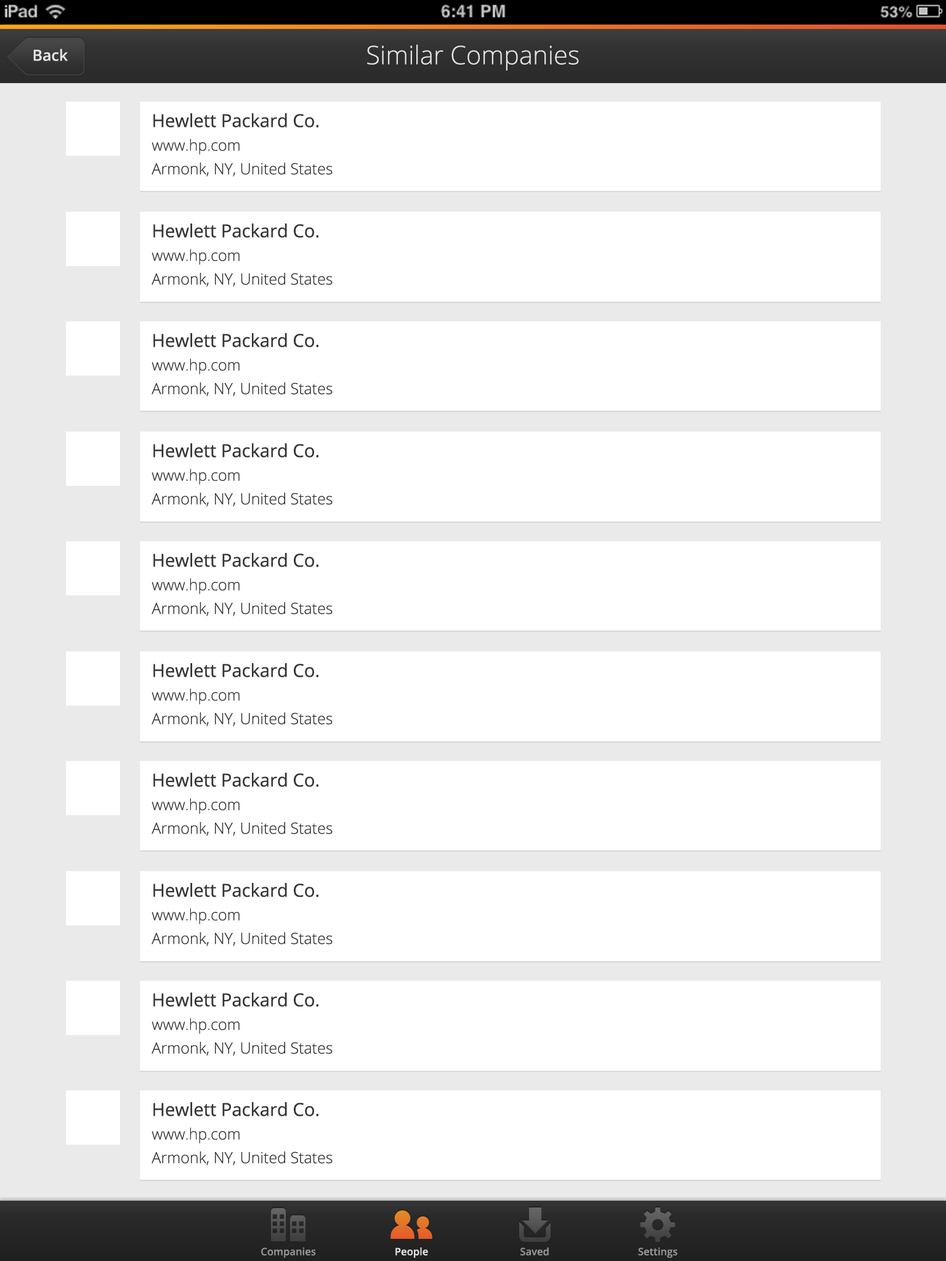
<style>
.page{position:relative;width:946px;height:1261px;background:#ffffff}
.page>*{position:absolute;margin:0}
.t1{font:15.4px "OpenSans-Semibold";color:#e5e5e5}
.t2{font:25.7px "OpenSans-Light";color:#e5e5e5}
.t3{font:15.4px "OpenSans-Light";color:#343434}
.t4{font:18px "OpenSans";color:#343434}
.t5{font:10.3px "OpenSans-Semibold";color:#969696}
.t6{font:10.3px "OpenSans-Semibold";color:#e5e5e5}
</style>
<div class="page">
<p class="t1" style="left:33px;top:49px;width:35px;height:12px">Back</p>
<p class="t2" style="left:367px;top:44px;width:212px;height:27px">Similar Companies</p>
<p class="t3" style="left:151px;top:113px;width:181px;height:64px"><span class="t4">Hewlett Packard Co.<br></span>www.hp.com<br>Armonk, NY, United States</p>
<p class="t3" style="left:151px;top:223px;width:181px;height:64px"><span class="t4">Hewlett Packard Co.<br></span>www.hp.com<br>Armonk, NY, United States</p>
<p class="t3" style="left:151px;top:333px;width:181px;height:63px"><span class="t4">Hewlett Packard Co.<br></span>www.hp.com<br>Armonk, NY, United States</p>
<p class="t3" style="left:151px;top:443px;width:181px;height:64px"><span class="t4">Hewlett Packard Co.<br></span>www.hp.com<br>Armonk, NY, United States</p>
<p class="t3" style="left:151px;top:553px;width:181px;height:63px"><span class="t4">Hewlett Packard Co.<br></span>www.hp.com<br>Armonk, NY, United States</p>
<p class="t3" style="left:151px;top:663px;width:181px;height:64px"><span class="t4">Hewlett Packard Co.<br></span>www.hp.com<br>Armonk, NY, United States</p>
<p class="t3" style="left:151px;top:773px;width:181px;height:63px"><span class="t4">Hewlett Packard Co.<br></span>www.hp.com<br>Armonk, NY, United States</p>
<p class="t3" style="left:151px;top:883px;width:181px;height:63px"><span class="t4">Hewlett Packard Co.<br></span>www.hp.com<br>Armonk, NY, United States</p>
<p class="t3" style="left:151px;top:992px;width:181px;height:64px"><span class="t4">Hewlett Packard Co.<br></span>www.hp.com<br>Armonk, NY, United States</p>
<p class="t3" style="left:151px;top:1102px;width:181px;height:63px"><span class="t4">Hewlett Packard Co.<br></span>www.hp.com<br>Armonk, NY, United States</p>
<p class="t5" style="left:261px;top:1247px;width:55px;height:11px">Companies</p>
<p class="t6" style="left:395px;top:1247px;width:33px;height:11px">People</p>
<p class="t5" style="left:520px;top:1247px;width:29px;height:8px">Saved</p>
<p class="t5" style="left:638px;top:1247px;width:39px;height:11px">Settings</p>
</div>
